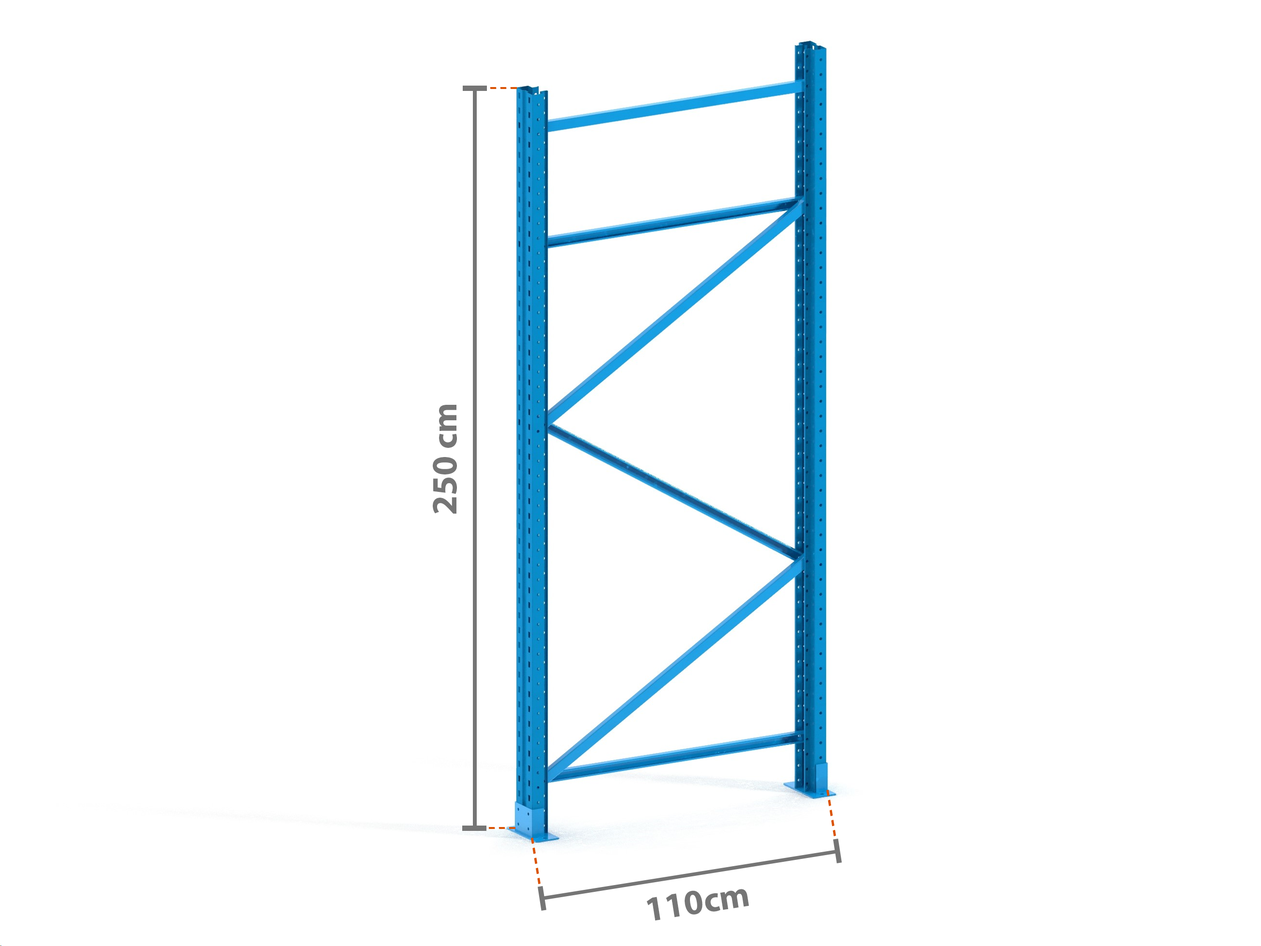
<style>
.page{position:relative;width:1261px;height:946px;background:#ffffff}
.page>*{position:absolute;margin:0}
.t1{font:35.5px "MyriadPro-Bold";color:#757575}
</style>
<div class="page">
<p class="t1" style="left:433px;top:405px;width:24px;height:108px;rotate:-90deg">250 cm</p>
<p class="t1" style="left:646px;top:889px;width:103px;height:32px;rotate:-9deg">110cm</p>
</div>
